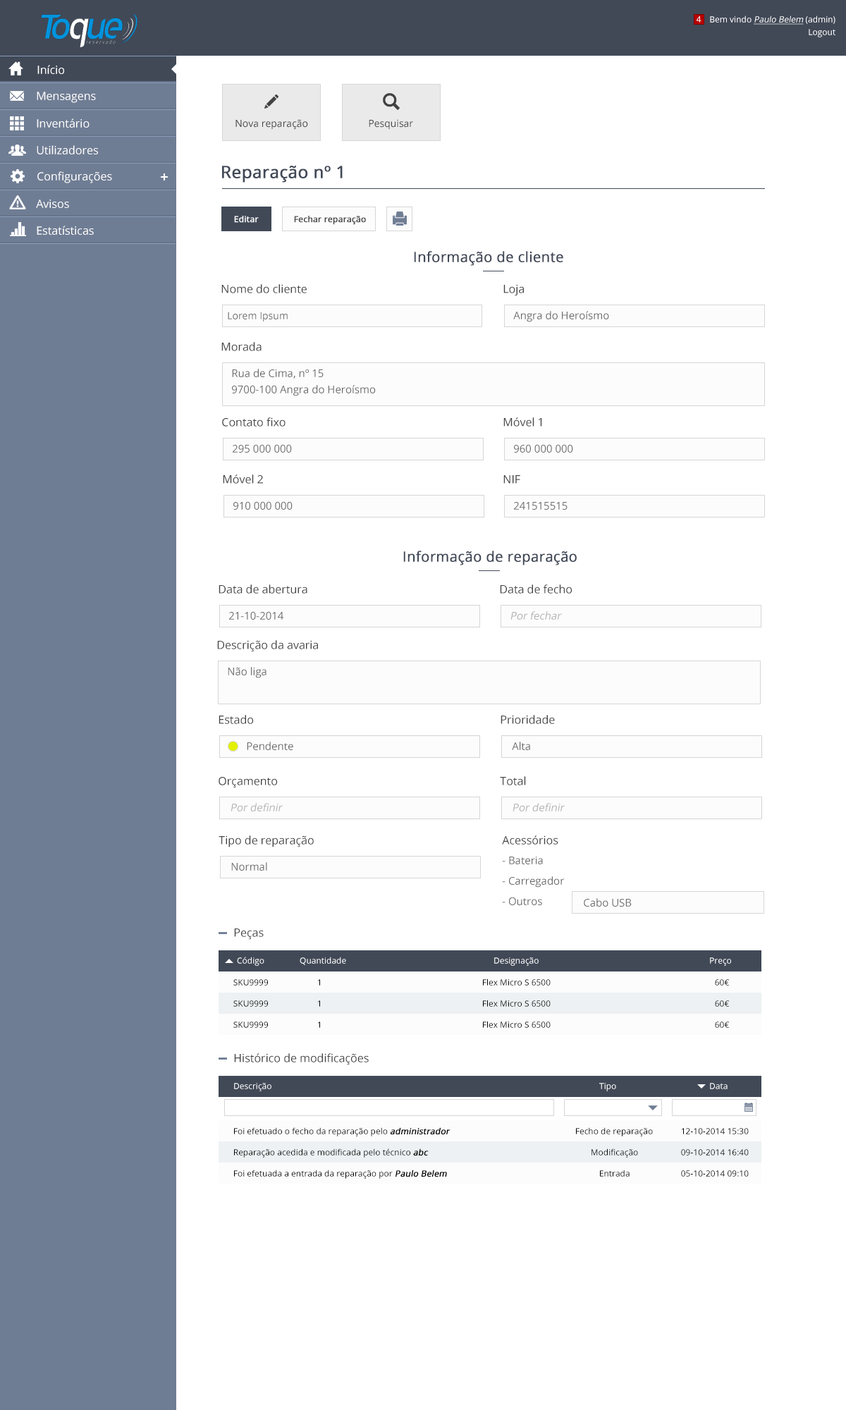
<style>
.page{position:relative;width:846px;height:1410px;background:#ffffff}
.page>*{position:absolute;margin:0}
.t1{font:8.5px "OpenSans";color:#ffffff}
.t2{font:8.5px "OpenSans";color:#ffffff;font-style:italic;text-decoration:underline}
.t3{font:11.3px "OpenSans";color:#ffffff}
.t4{font:9.9px "OpenSans";color:#424242}
.t5{font:16.9px "OpenSans";color:#414957;font-weight:bold}
.t6{font:8.5px "OpenSans";color:#f9f9f9;font-weight:bold}
.t7{font:8.5px "OpenSans";color:#424242;font-weight:bold}
.t8{font:14.1px "OpenSans";color:#414957;font-weight:bold}
.t9{font:11.3px "OpenSans";color:#424242}
.t10{font:9.9px "OpenSans";color:#6c6c6c}
.t11{font:10.6px "OpenSans";color:#6c6c6c}
.t12{font:10.6px/16.2px "OpenSans";color:#6c6c6c}
.t13{font:10.6px "OpenSans";color:#b3b3b3;font-style:italic}
.t14{font:10.6px/20.4px "OpenSans";color:#6c6c6c}
.t15{font:8.5px "OpenSans";color:#000000}
.t16{font:8.5px "OpenSans";color:#000000;font-weight:bold;font-style:italic}
</style>
<div class="page">
<p class="t1" style="left:696px;top:16px;width:5px;height:7px">4</p>
<p class="t2" style="left:710px;top:16px;width:125px;height:9px"><span class="t1">Bem vindo </span>Paulo Belem<span class="t1"> (admin)</span></p>
<p class="t1" style="left:808px;top:29px;width:27px;height:8px">Logout</p>
<p class="t3" style="left:37px;top:65px;width:27px;height:9px">Início</p>
<p class="t3" style="left:37px;top:92px;width:59px;height:11px">Mensagens</p>
<p class="t3" style="left:37px;top:118px;width:53px;height:10px">Inventário</p>
<p class="t4" style="left:235px;top:119px;width:73px;height:11px">Nova reparação</p>
<p class="t4" style="left:369px;top:119px;width:44px;height:11px">Pesquisar</p>
<p class="t3" style="left:37px;top:145px;width:61px;height:9px">Utilizadores</p>
<p class="t3" style="left:37px;top:171px;width:75px;height:12px">Configurações</p>
<p class="t5" style="left:222px;top:166px;width:121px;height:17px">Reparação nº 1</p>
<p class="t3" style="left:36px;top:199px;width:33px;height:9px">Avisos</p>
<p class="t6" style="left:234px;top:216px;width:25px;height:7px">Editar</p>
<p class="t7" style="left:294px;top:216px;width:72px;height:9px">Fechar reparação</p>
<p class="t3" style="left:37px;top:226px;width:57px;height:9px">Estatísticas</p>
<p class="t8" style="left:414px;top:251px;width:149px;height:15px">Informação de cliente</p>
<p class="t9" style="left:221px;top:284px;width:86px;height:9px">Nome do cliente</p>
<p class="t9" style="left:503px;top:284px;width:21px;height:12px">Loja</p>
<p class="t10" style="left:228px;top:312px;width:60px;height:9px">Lorem Ipsum</p>
<p class="t11" style="left:513px;top:311px;width:96px;height:11px">Angra do Heroísmo</p>
<p class="t9" style="left:221px;top:342px;width:41px;height:9px">Morada</p>
<p class="t12" style="left:232px;top:369px;width:144px;height:27px">Rua de Cima, nº 15<br>9700-100 Angra do Heroísmo</p>
<p class="t9" style="left:222px;top:417px;width:63px;height:9px">Contato fixo</p>
<p class="t9" style="left:503px;top:417px;width:39px;height:9px">Móvel 1</p>
<p class="t11" style="left:233px;top:444px;width:59px;height:9px">295 000 000</p>
<p class="t11" style="left:514px;top:444px;width:59px;height:9px">960 000 000</p>
<p class="t9" style="left:223px;top:474px;width:40px;height:10px">Móvel 2</p>
<p class="t9" style="left:503px;top:475px;width:17px;height:9px">NIF</p>
<p class="t11" style="left:233px;top:501px;width:60px;height:9px">910 000 000</p>
<p class="t11" style="left:514px;top:502px;width:53px;height:8px">241515515</p>
<p class="t8" style="left:403px;top:551px;width:174px;height:14px">Informação de reparação</p>
<p class="t9" style="left:219px;top:584px;width:88px;height:10px">Data de abertura</p>
<p class="t9" style="left:500px;top:584px;width:72px;height:10px">Data de fecho</p>
<p class="t11" style="left:229px;top:611px;width:54px;height:9px">21-10-2014</p>
<p class="t13" style="left:510px;top:611px;width:52px;height:9px">Por fechar</p>
<p class="t9" style="left:217px;top:640px;width:101px;height:12px">Descrição da avaria</p>
<p class="t11" style="left:228px;top:667px;width:38px;height:11px">Não liga</p>
<p class="t9" style="left:219px;top:715px;width:34px;height:9px">Estado</p>
<p class="t9" style="left:500px;top:715px;width:55px;height:9px">Prioridade</p>
<p class="t11" style="left:247px;top:742px;width:46px;height:8px">Pendente</p>
<p class="t11" style="left:512px;top:742px;width:18px;height:8px">Alta</p>
<p class="t9" style="left:219px;top:777px;width:58px;height:11px">Orçamento</p>
<p class="t9" style="left:500px;top:776px;width:26px;height:9px">Total</p>
<p class="t13" style="left:230px;top:803px;width:53px;height:8px">Por definir</p>
<p class="t13" style="left:512px;top:803px;width:53px;height:8px">Por definir</p>
<p class="t9" style="left:219px;top:835px;width:95px;height:12px">Tipo de reparação</p>
<p class="t9" style="left:502px;top:835px;width:56px;height:9px">Acessórios</p>
<p class="t14" style="left:502px;top:856px;width:63px;height:49px">- Bateria<br>- Carregador<br>- Outros</p>
<p class="t11" style="left:231px;top:862px;width:36px;height:9px">Normal</p>
<p class="t11" style="left:584px;top:898px;width:48px;height:8px">Cabo USB</p>
<p class="t9" style="left:234px;top:928px;width:30px;height:12px">Peças</p>
<p class="t1" style="left:237px;top:957px;width:27px;height:9px">Código</p>
<p class="t1" style="left:300px;top:957px;width:46px;height:8px">Quantidade</p>
<p class="t1" style="left:494px;top:957px;width:45px;height:9px">Designação</p>
<p class="t1" style="left:710px;top:957px;width:21px;height:9px">Preço</p>
<p class="t15" style="left:233px;top:979px;width:35px;height:6px">SKU9999</p>
<p class="t15" style="left:318px;top:979px;width:2px;height:6px">1</p>
<p class="t15" style="left:483px;top:978px;width:68px;height:7px">Flex Micro S 6500</p>
<p class="t15" style="left:715px;top:979px;width:15px;height:6px">60€</p>
<p class="t15" style="left:233px;top:1000px;width:35px;height:7px">SKU9999</p>
<p class="t15" style="left:318px;top:1000px;width:2px;height:7px">1</p>
<p class="t15" style="left:483px;top:1000px;width:68px;height:7px">Flex Micro S 6500</p>
<p class="t15" style="left:715px;top:1000px;width:15px;height:7px">60€</p>
<p class="t15" style="left:233px;top:1021px;width:35px;height:7px">SKU9999</p>
<p class="t15" style="left:318px;top:1021px;width:2px;height:7px">1</p>
<p class="t15" style="left:483px;top:1021px;width:68px;height:7px">Flex Micro S 6500</p>
<p class="t15" style="left:715px;top:1021px;width:15px;height:7px">60€</p>
<p class="t9" style="left:234px;top:1053px;width:135px;height:12px">Histórico de modificações</p>
<p class="t1" style="left:234px;top:1083px;width:37px;height:8px">Descrição</p>
<p class="t1" style="left:599px;top:1083px;width:17px;height:8px">Tipo</p>
<p class="t1" style="left:710px;top:1083px;width:17px;height:6px">Data</p>
<p class="t15" style="left:234px;top:1127px;width:216px;height:9px">Foi efetuado o fecho da reparação pelo <span class="t16">administrador</span></p>
<p class="t15" style="left:576px;top:1127px;width:77px;height:9px">Fecho de reparação</p>
<p class="t15" style="left:682px;top:1128px;width:67px;height:6px">12-10-2014 15:30</p>
<p class="t15" style="left:234px;top:1148px;width:195px;height:9px">Reparação acedida e modificada pelo técnico <span class="t16">abc</span></p>
<p class="t15" style="left:591px;top:1148px;width:47px;height:9px">Modificação</p>
<p class="t15" style="left:681px;top:1149px;width:68px;height:6px">09-10-2014 16:40</p>
<p class="t15" style="left:234px;top:1169px;width:213px;height:10px">Foi efetuada a entrada da reparação por <span class="t16">Paulo Belem</span></p>
<p class="t15" style="left:600px;top:1169px;width:29px;height:7px">Entrada</p>
<p class="t15" style="left:681px;top:1170px;width:68px;height:6px">05-10-2014 09:10</p>
</div>
